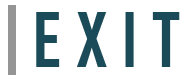
<style>
.page{position:relative;width:189px;height:80px;background:#ffffff}
.page>*{position:absolute;margin:0}
.t1{font:72px "AgencyFB-Bold";color:#1b4a59}
</style>
<div class="page">
<p class="t1" style="left:36px;top:12px;width:144px;height:55px">E X I T</p>
</div>
